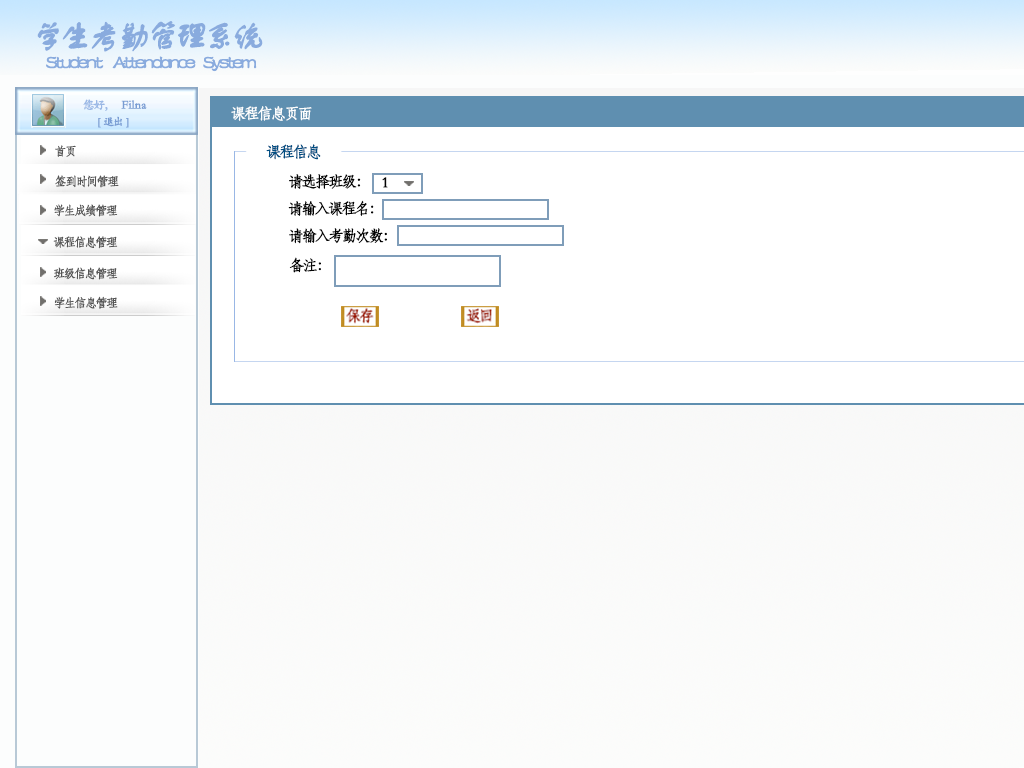
<style>
.page{position:relative;width:1024px;height:768px;background:#ffffff}
.page>*{position:absolute;margin:0}
.t1{font:32.7px "FZSTK--GBK1-0";letter-spacing:-0.15em;color:#89abde;font-weight:bold}
.t2{font:19.6px "FZSTK--GBK1-0";letter-spacing:-0.15em;color:#89abde;font-weight:bold}
.t3{font:12px "STKaiti";letter-spacing:-0.15em;color:#99b7e5;font-weight:bold}
.t4{font:12px "STKaiti";color:#789cd3;font-weight:bold}
.t5{font:15.3px "STFangsong";letter-spacing:-0.15em;color:#fdfefe;font-weight:bold}
.t6{font:10.9px "STKaiti";letter-spacing:-0.15em;color:#789cd3;font-weight:bold}
.t7{font:12px "STFangsong";letter-spacing:-0.15em;color:#555555;font-weight:bold}
.t8{font:15.3px "STFangsong";letter-spacing:-0.15em;color:#014e82;font-weight:bold}
.t9{font:15.3px "STFangsong";letter-spacing:-0.15em;color:#030303;font-weight:bold}
</style>
<div class="page">
<p class="t1" style="left:37px;top:21px;width:226px;height:31px">学生考勤管理系统</p>
<p class="t2" style="left:46px;top:56px;width:211px;height:16px">Student     Attendance    System</p>
<p class="t3" style="left:83px;top:99px;width:25px;height:12px">您好，</p>
<p class="t4" style="left:121px;top:100px;width:26px;height:9px">Filna</p>
<p class="t5" style="left:231px;top:106px;width:81px;height:15px">课程信息页面</p>
<p class="t6" style="left:98px;top:116px;width:31px;height:12px">[   退出   ]</p>
<p class="t7" style="left:55px;top:145px;width:21px;height:12px">首页</p>
<p class="t8" style="left:266px;top:144px;width:55px;height:16px">课程信息</p>
<p class="t9" style="left:289px;top:174px;width:72px;height:15px">请选择班级：</p>
<p class="t7" style="left:55px;top:175px;width:64px;height:13px">签到时间管理</p>
<p class="t9" style="left:382px;top:177px;width:6px;height:11px">1</p>
<p class="t7" style="left:54px;top:204px;width:64px;height:13px">学生成绩管理</p>
<p class="t9" style="left:288px;top:200px;width:86px;height:16px">请输入课程名：</p>
<p class="t9" style="left:289px;top:228px;width:98px;height:16px">请输入考勤次数：</p>
<p class="t7" style="left:53px;top:236px;width:65px;height:13px">课程信息管理</p>
<p class="t9" style="left:289px;top:257px;width:32px;height:16px">备注：</p>
<p class="t7" style="left:54px;top:267px;width:64px;height:13px">班级信息管理</p>
<p class="t7" style="left:54px;top:296px;width:64px;height:13px">学生信息管理</p>
</div>
